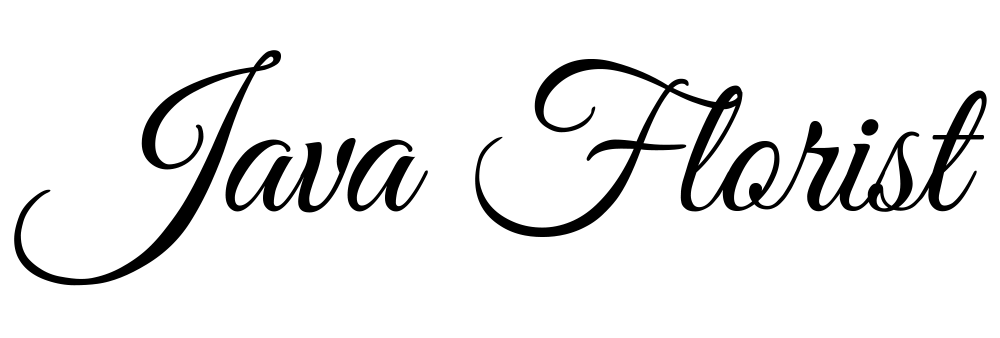
<style>
.page{position:relative;width:1000px;height:338px;background:#ffffff}
.page>*{position:absolute;margin:0}
.t1{font:199.9px "GreatVibes-Regular";color:#000000}
</style>
<div class="page">
<p class="t1" style="left:14px;top:50px;width:973px;height:236px">Java Florist</p>
</div>
